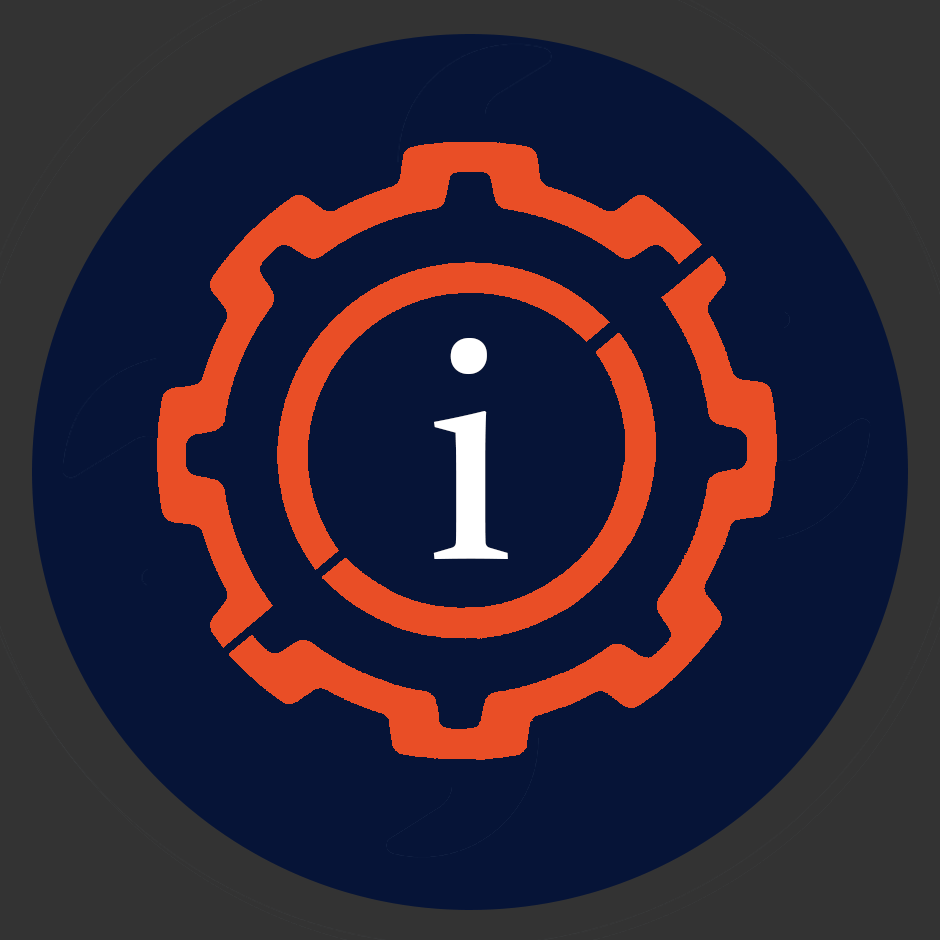
<style>
.page{position:relative;width:940px;height:940px;background:#061437}
.page>*{position:absolute;margin:0}
.t1{font:320px "Constantia";color:#ffffff}
</style>
<div class="page">
<p class="t1" style="left:433px;top:338px;width:75px;height:221px">i</p>
</div>
